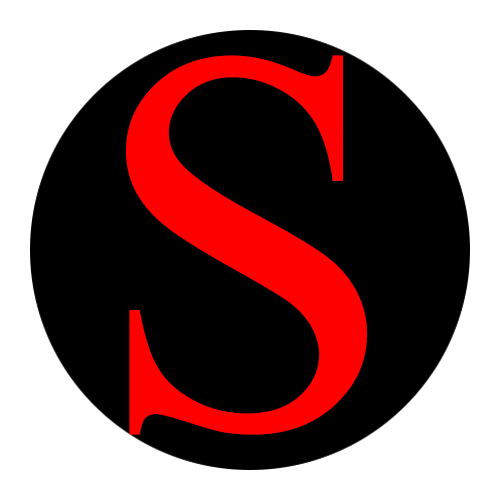
<style>
.page{position:relative;width:500px;height:500px;background:#000000}
.page>*{position:absolute;margin:0}
.t1{font:547px "TimesNewRomanPSMT";color:#ff0000}
</style>
<div class="page">
<p class="t1" style="left:126px;top:55px;width:241px;height:380px">S</p>
</div>
